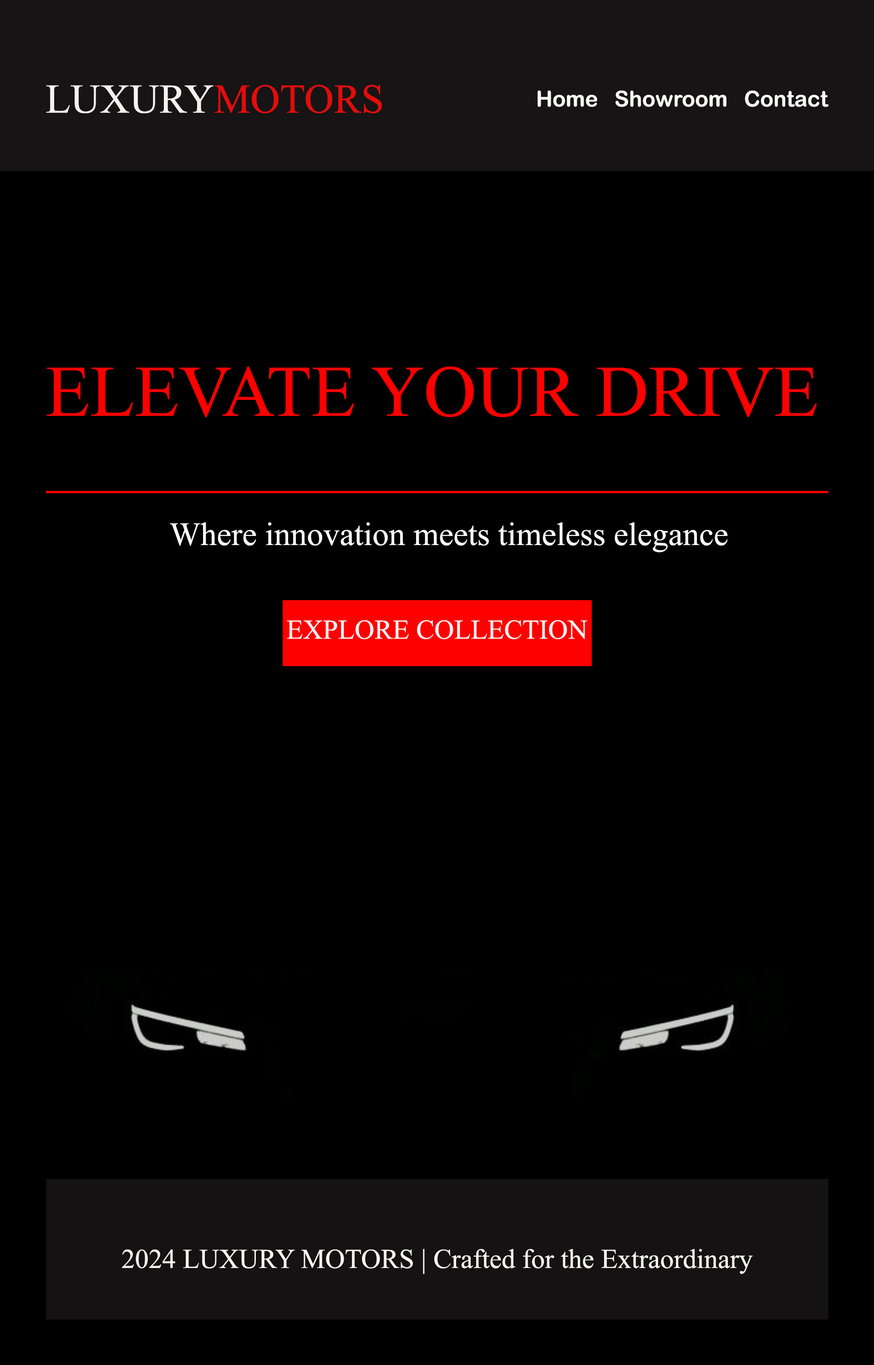
<style>
.page{position:relative;width:874px;height:1365px;background:#000000}
.page>*{position:absolute;margin:0}
.t1{font:41px "TimesNewRomanPSMT";color:#f5f1f1}
.t2{font:41px "TimesNewRomanPSMT";color:#e30c0c}
.t3{font:21.8px "ArialRoundedMTBold";color:#fcf8f8}
.t4{font:72.8px "TimesNewRomanPSMT";color:#ff0000}
.t5{font:32.8px "TimesNewRomanPSMT";color:#faf8f8}
.t6{font:27.3px "TimesNewRomanPSMT";color:#f6f4f4}
.t7{font:27.3px "TimesNewRomanPSMT";color:#fbf3f3}
</style>
<div class="page">
<p class="t1" style="left:46px;top:85px;width:336px;height:28px">LUXURY<span class="t2">MOTORS</span></p>
<p class="t3" style="left:537px;top:91px;width:292px;height:16px">Home   Showroom   Contact</p>
<p class="t4" style="left:47px;top:366px;width:770px;height:51px">ELEVATE YOUR DRIVE</p>
<p class="t5" style="left:170px;top:522px;width:557px;height:30px">Where innovation meets timeless elegance</p>
<p class="t6" style="left:287px;top:620px;width:300px;height:19px">EXPLORE COLLECTION</p>
<p class="t7" style="left:121px;top:1249px;width:632px;height:25px">2024 LUXURY MOTORS | Crafted for the Extraordinary</p>
</div>
